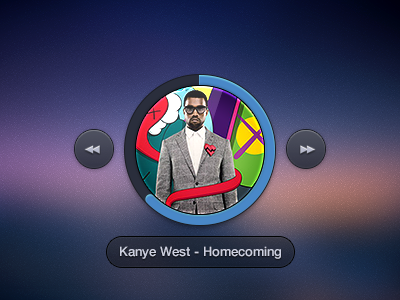
<style>
.page{position:relative;width:400px;height:300px}
.page>*{position:absolute;margin:0}
.t1{font:13px "HelveticaNeueLTCom-Md";color:#ced1e1}
</style>
<div class="page">
<p class="t1" style="left:120px;top:246px;width:161px;height:13px">Kanye West - Homecoming</p>
</div>
